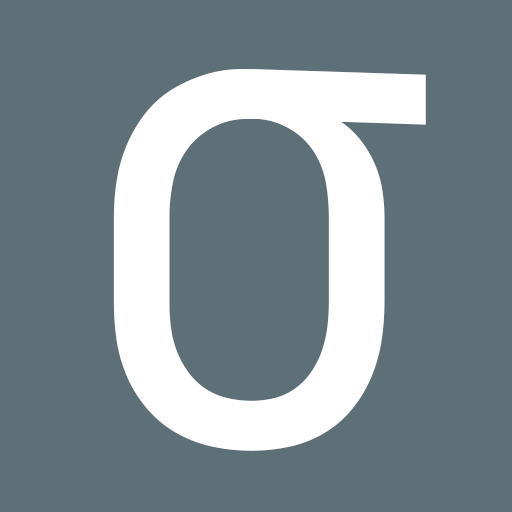
<style>
.page{position:relative;width:512px;height:512px;background:#5d6f77}
.page>*{position:absolute;margin:0}
.t1{font:712.5px "Sarasa-Mono-J-Regular";color:#ffffff}
</style>
<div class="page">
<p class="t1" style="left:113px;top:69px;width:313px;height:382px">σ</p>
</div>
